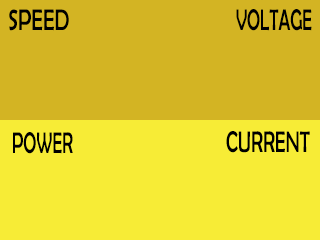
<style>
.page{position:relative;width:320px;height:240px;background:#d3b423}
.page>*{position:absolute;margin:0}
.t1{font:29.6px "BerlinSansFB-Reg";color:#000000;scale:0.72 1}
.t2{font:29.6px "BerlinSansFB-Reg";color:#000000;scale:0.6 1}
.t3{font:29.6px "BerlinSansFB-Reg";color:#000000;scale:0.61 1}
.t4{font:29.6px "BerlinSansFB-Reg";color:#000000;scale:0.67 1}
</style>
<div class="page">
<p class="t1" style="left:9px;top:9px;width:60px;height:22px">SPEED</p>
<p class="t2" style="left:236px;top:9px;width:76px;height:22px">VOLTAGE</p>
<p class="t3" style="left:13px;top:132px;width:60px;height:22px">POWER</p>
<p class="t4" style="left:226px;top:131px;width:84px;height:22px">CURRENT</p>
</div>
